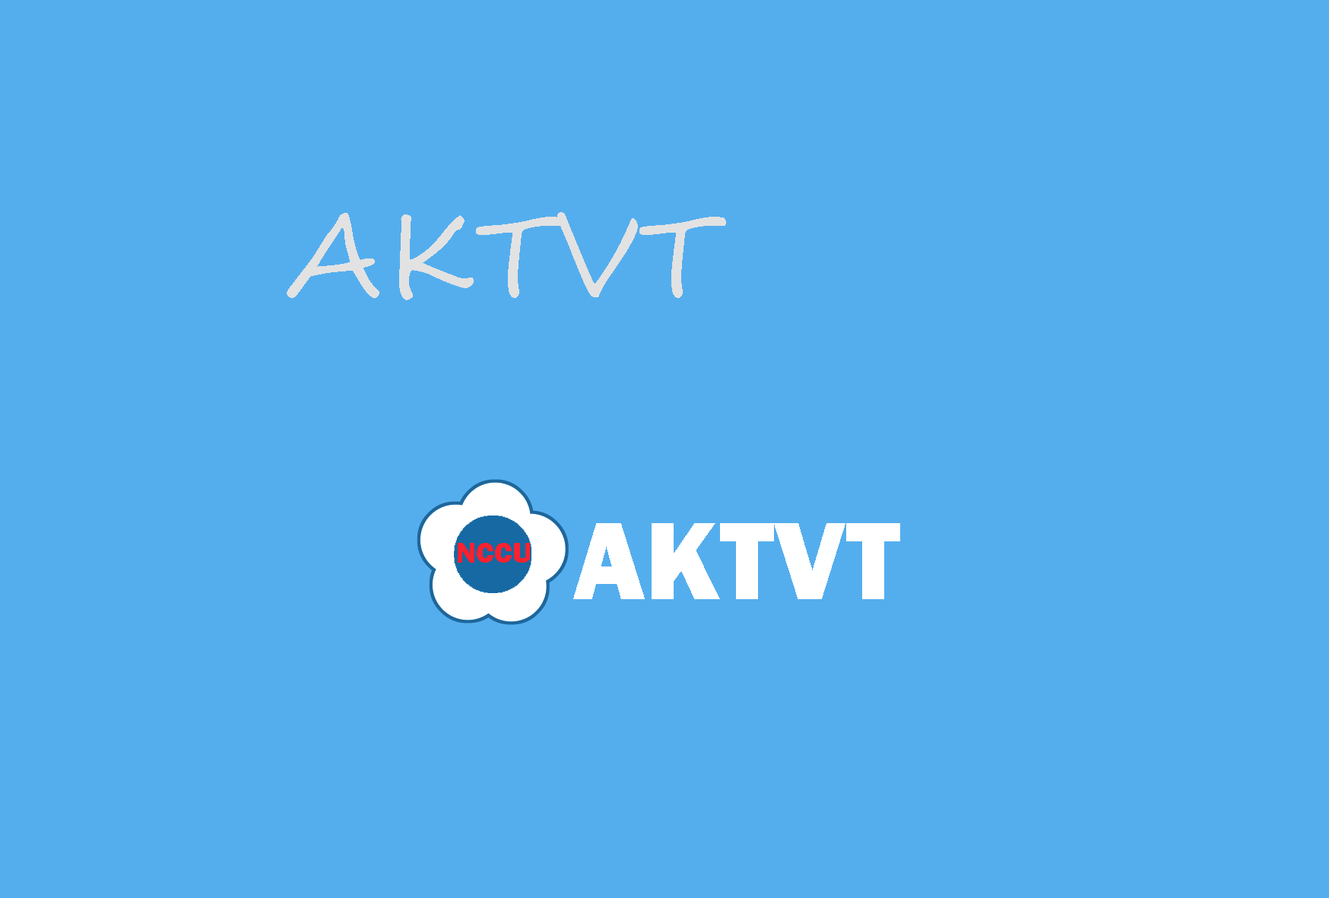
<style>
.page{position:relative;width:1329px;height:898px;background:#54aeee}
.page>*{position:absolute;margin:0}
.t1{font:114px "SegoeScript";color:#e2e2e2}
.t2{font:114px "FranklinGothic-Heavy";color:#ffffff}
</style>
<div class="page">
<p class="t1" style="left:287px;top:212px;width:439px;height:88px">AKTVT</p>
<p class="t2" style="left:573px;top:523px;width:327px;height:76px">AKTVT</p>
</div>
